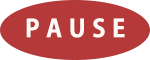
<style>
.page{position:relative;width:150px;height:60px;background:#b53939}
.page>*{position:absolute;margin:0}
.t1{font:24px "AdobeGothicStd-Bold";letter-spacing:0.28em;color:#fdfbf7}
</style>
<div class="page">
<p class="t1" style="left:26px;top:18px;width:99px;height:20px">PAUSE</p>
</div>
